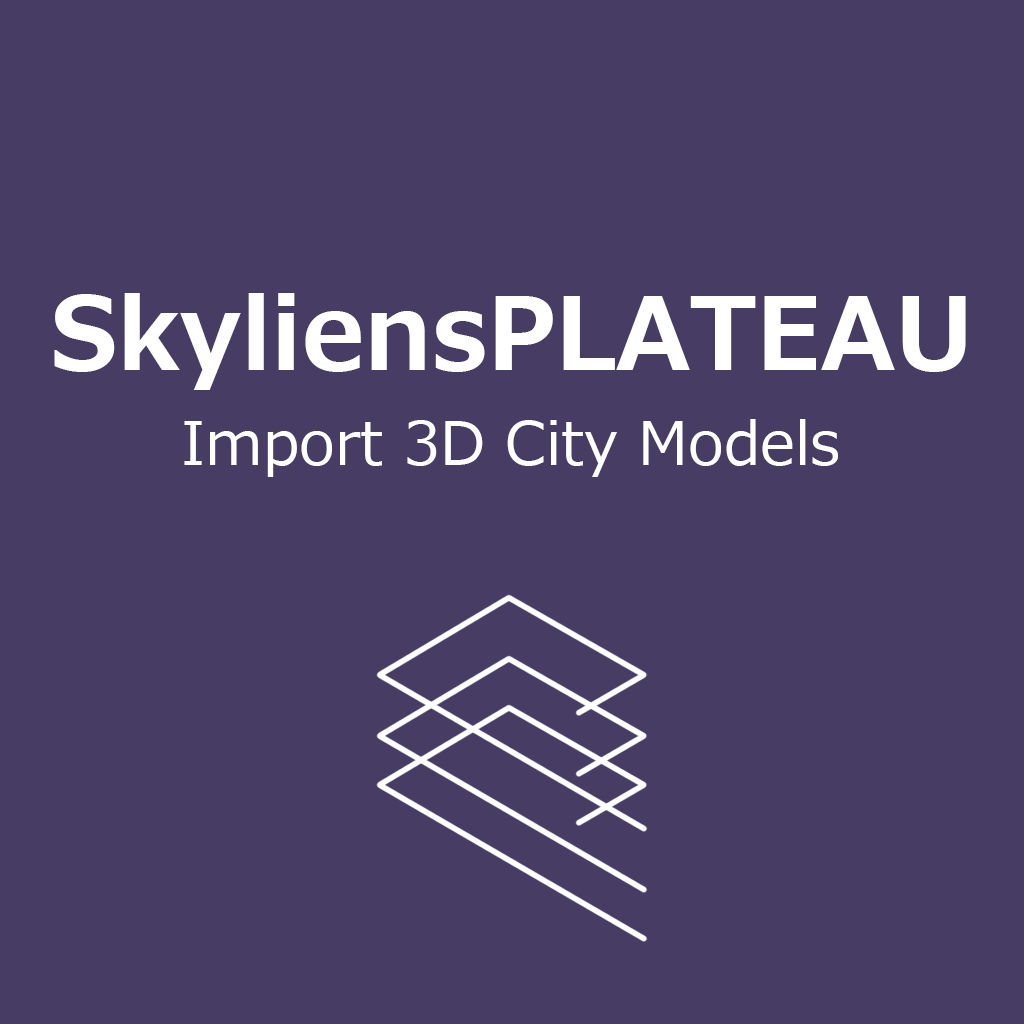
<style>
.page{position:relative;width:1024px;height:1024px;background:#463c64}
.page>*{position:absolute;margin:0}
.t1{font:100px "Meiryo-Bold";color:#ffffff}
.t2{font:60px "Meiryo";color:#ffffff}
</style>
<div class="page">
<p class="t1" style="left:54px;top:293px;width:912px;height:97px">SkyliensPLATEAU</p>
<p class="t2" style="left:184px;top:419px;width:654px;height:58px">Import 3D City Models</p>
</div>
